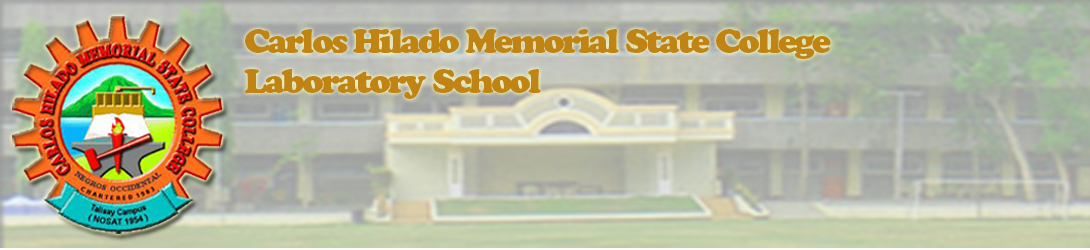
<style>
.page{position:relative;width:1090px;height:250px}
.page>*{position:absolute;margin:0}
.t1{font:33.3px "CooperBlackStd";letter-spacing:-0.08em;color:#bf8413}
</style>
<div class="page">
<p class="t1" style="left:244px;top:29px;width:587px;height:70px">Carlos Hilado Memorial State College<br>Laboratory School</p>
</div>
